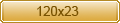
<style>
.page{position:relative;width:120px;height:23px}
.page>*{position:absolute;margin:0}
.t1{font:13px "ArialMT";color:#775100}
</style>
<div class="page">
<p class="t1" style="left:37px;top:6px;width:42px;height:10px">120x23</p>
</div>
